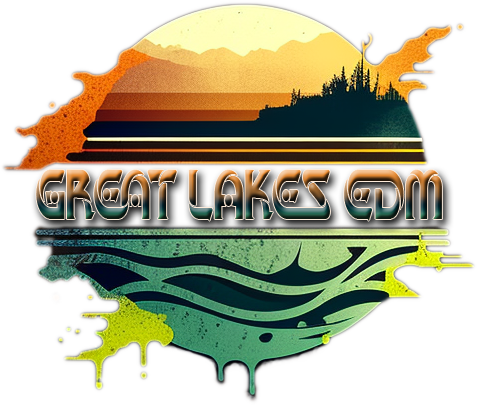
<style>
.page{position:relative;width:477px;height:405px;background:#ffffff}
.page>*{position:absolute;margin:0}
.t1{font:45.2px "CREATEDATTACHEDDEMO-BOLD";scale:0.59 1}
</style>
<div class="page">
<p class="t1" style="left:36px;top:170px;width:406px;height:51px">gREAT lakes edm</p>
</div>
